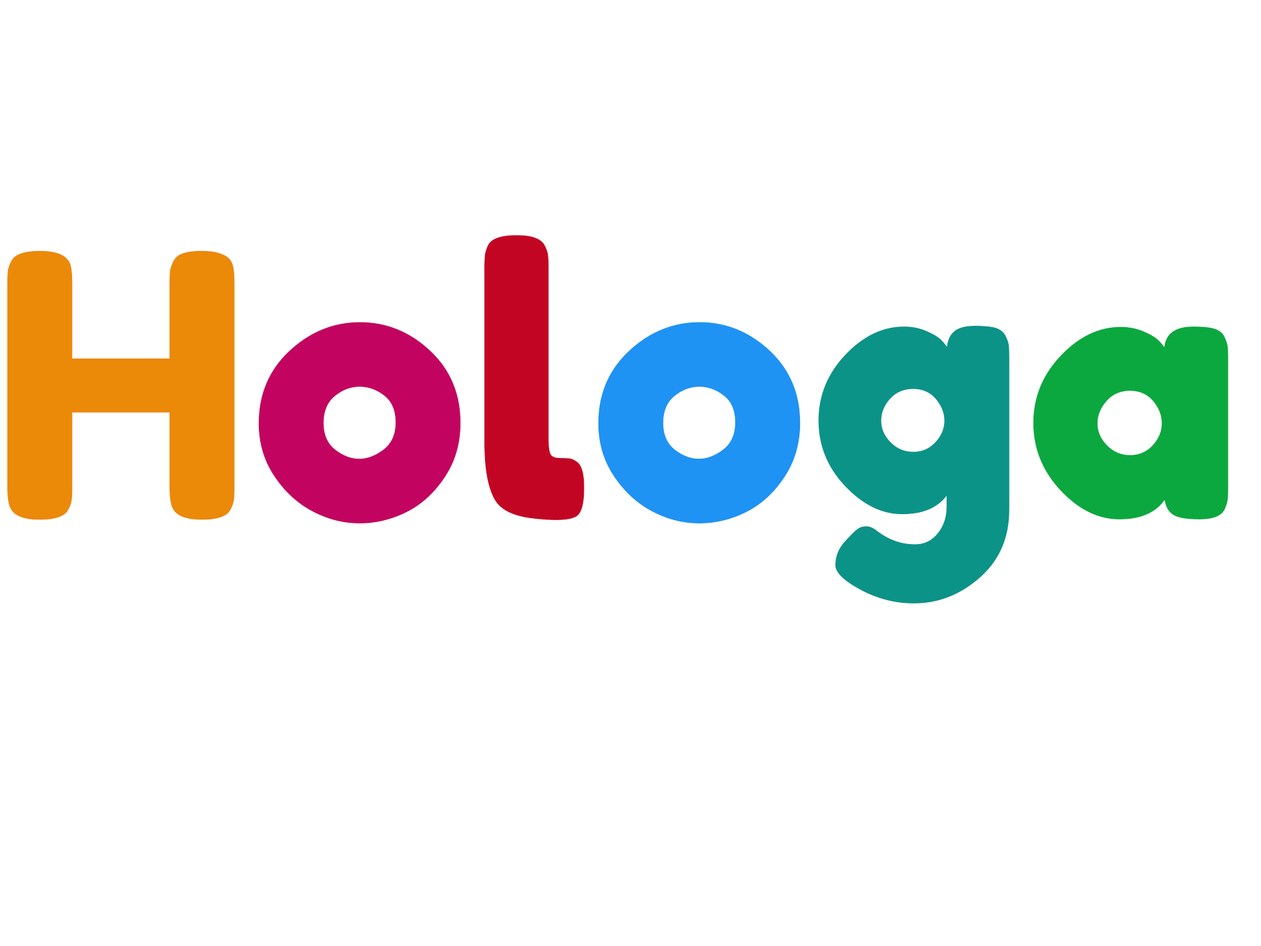
<style>
.page{position:relative;width:1261px;height:946px;background:#ffffff}
.page>*{position:absolute;margin:0}
.t1{font:367px "FredokaOne-Regular";color:#eb8909}
.t2{font:367px "FredokaOne-Regular";color:#c20460}
.t3{font:367px "FredokaOne-Regular";color:#c30524}
.t4{font:367px "FredokaOne-Regular";color:#1e93f3}
.t5{font:367px "FredokaOne-Regular";color:#0b9388}
.t6{font:367px "FredokaOne-Regular";color:#0ba83f}
</style>
<div class="page">
<p class="t1" style="left:7px;top:235px;width:1221px;height:368px">H<span class="t2">o</span><span class="t3">l</span><span class="t4">o</span><span class="t5">g</span><span class="t6">a</span></p>
</div>
